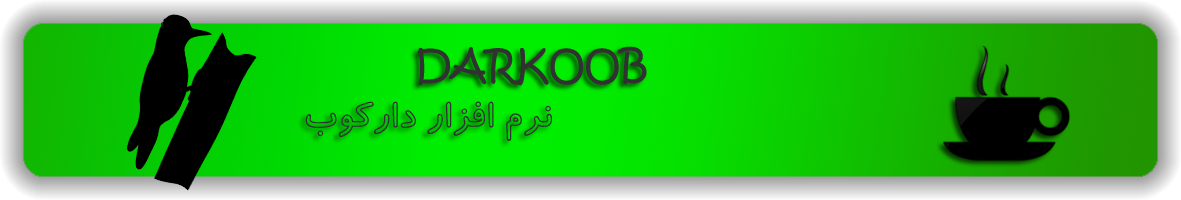
<style>
.page{position:relative;width:1181px;height:200px}
.page>*{position:absolute;margin:0}
.t1{font:40px "KristenITC-Regular";color:#313131}
.t2{font:40px "BKoodakOutline";color:#313131}
</style>
<div class="page">
<p class="t1" style="left:417px;top:46px;width:230px;height:40px">DARKOOB</p>
<p class="t2" style="left:305px;top:101px;width:247px;height:40px">نرم افزار دارکوب</p>
</div>
